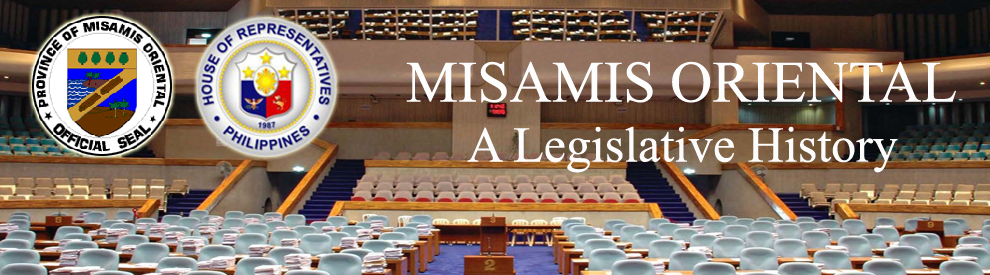
<style>
.page{position:relative;width:990px;height:275px}
.page>*{position:absolute;margin:0}
.t1{font:50px "TimesNewRomanPSMT";color:#fdfcfc}
.t2{font:58.3px "TimesNewRomanPSMT";color:#fdfdfd}
</style>
<div class="page">
<p class="t1" style="left:406px;top:61px;width:550px;height:112px;text-align:center"><span class="t2">MISAMIS ORIENTAL<br></span>A Legislative History</p>
</div>
